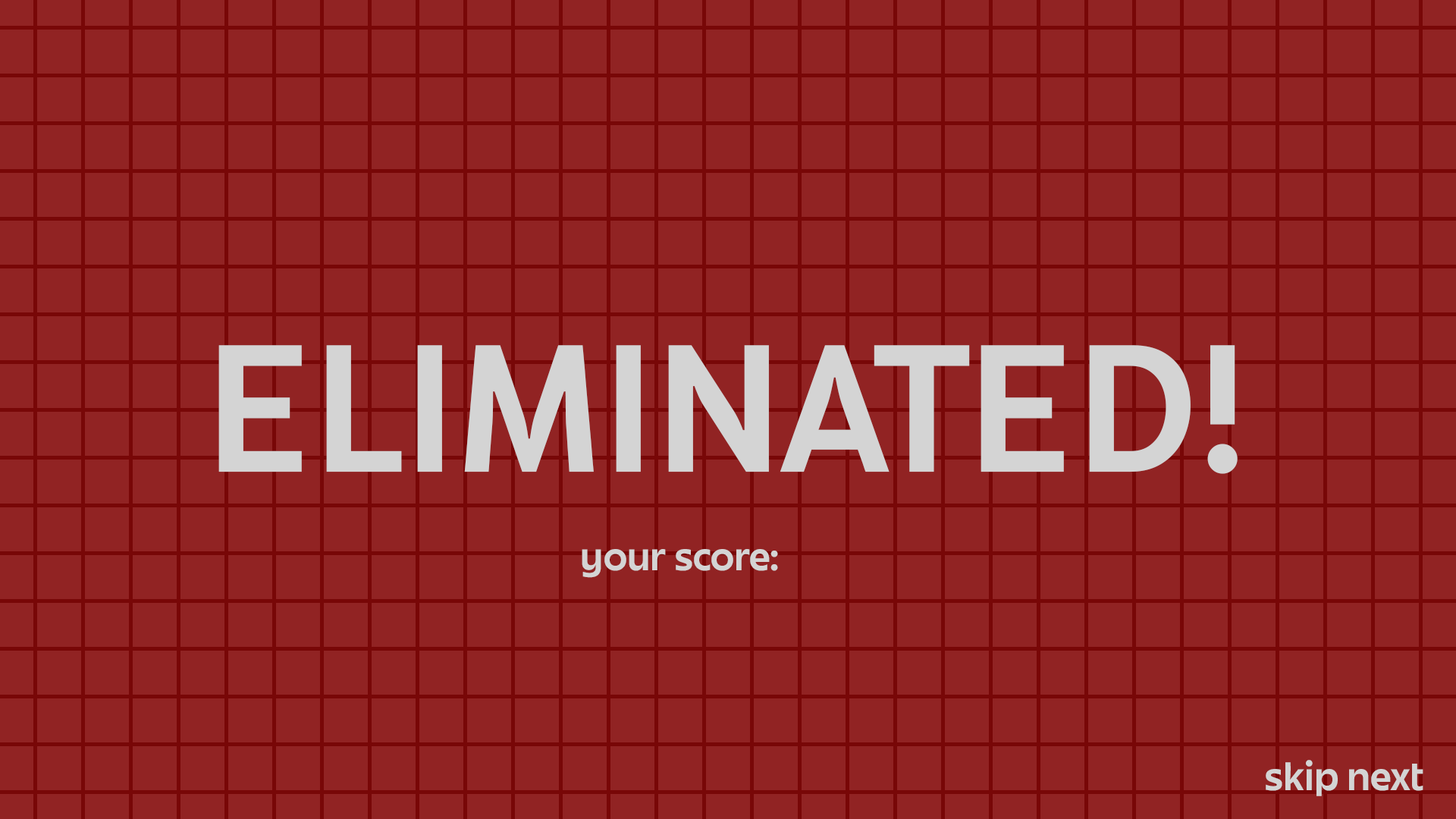
<style>
.page{position:relative;width:1456px;height:819px;background:#912323}
.page>*{position:absolute;margin:0}
.t1{font:158px "JuneExptVariable-Active";color:#d4d4d4}
.t2{font:34.9px "JuneExptVariable-Active";color:#d4d4d4}
</style>
<div class="page">
<p class="t1" style="left:218px;top:345px;width:1020px;height:129px">ELIMINATED!</p>
<p class="t2" style="left:582px;top:549px;width:196px;height:29px">your score:</p>
<p class="t2" style="left:1266px;top:760px;width:157px;height:36px">skip next</p>
</div>
